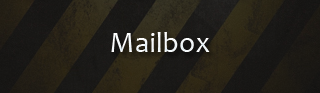
<style>
.page{position:relative;width:320px;height:93px}
.page>*{position:absolute;margin:0}
.t1{font:29.5px "Candara";color:#ffffff}
</style>
<div class="page">
<p class="t1" style="left:111px;top:32px;width:99px;height:20px">Mailbox</p>
</div>
